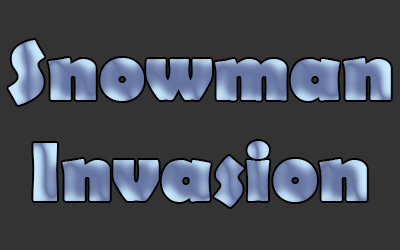
<style>
.page{position:relative;width:400px;height:250px;background:#333333}
.page>*{position:absolute;margin:0}
.t1{font:84.5px "BerlinSansFB-Bold"}
</style>
<div class="page">
<p class="t1" style="left:8px;top:40px;width:383px;height:167px;text-align:center">Snowman<br>Invasion</p>
</div>
